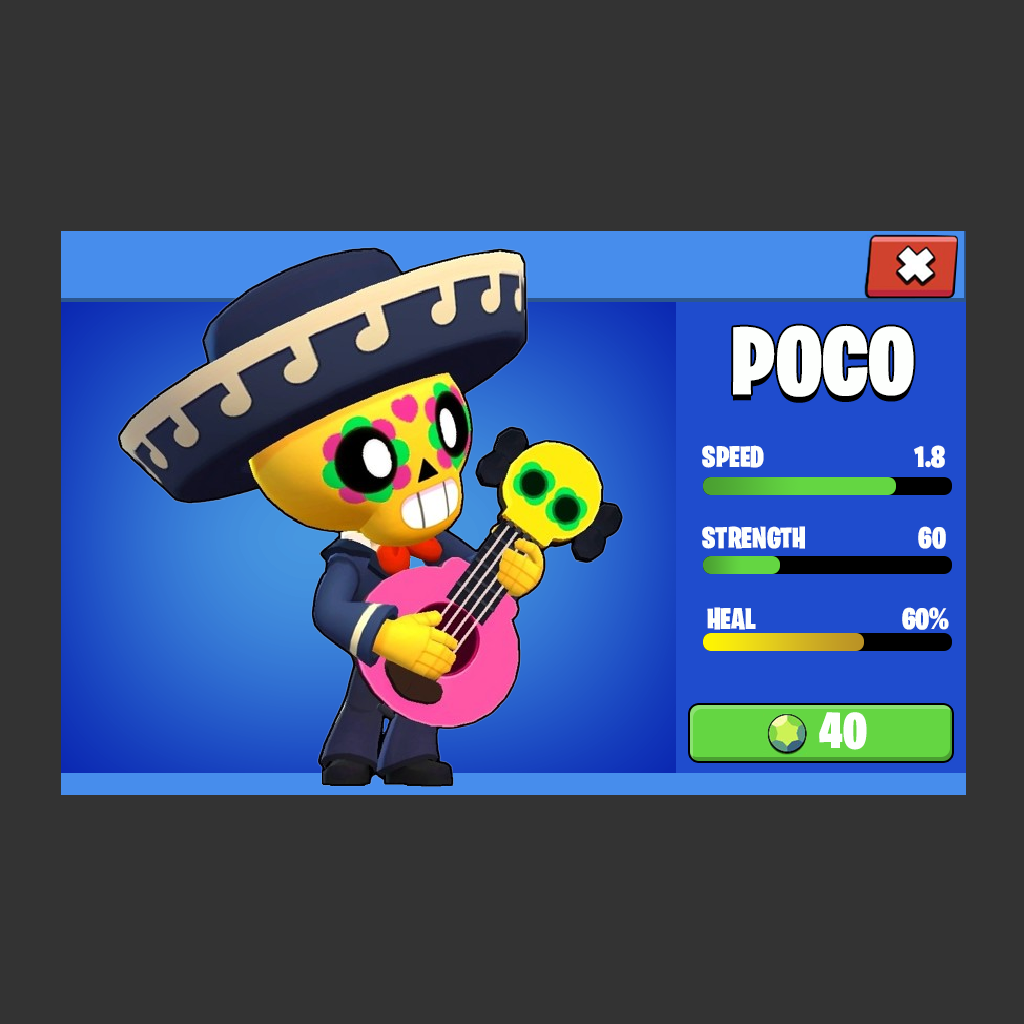
<style>
.page{position:relative;width:1024px;height:1024px;background:#333333}
.page>*{position:absolute;margin:0}
.t1{font:97.7px "BurbankBigCondensed-Black";color:#fdfffd}
.t2{font:30px "BurbankBigCondensed-Black";color:#fdfffd}
.t3{font:51px "BurbankBigCondensed-Black";color:#fdfffd}
</style>
<div class="page">
<p class="t1" style="left:733px;top:325px;width:181px;height:72px">POCO</p>
<p class="t2" style="left:702px;top:445px;width:62px;height:23px">SPEED</p>
<p class="t2" style="left:914px;top:445px;width:31px;height:23px">1.8<br>8</p>
<p class="t2" style="left:702px;top:526px;width:103px;height:23px">STRENGTH</p>
<p class="t2" style="left:918px;top:526px;width:28px;height:23px">60</p>
<p class="t2" style="left:707px;top:607px;width:49px;height:23px">HEAL</p>
<p class="t2" style="left:902px;top:607px;width:47px;height:23px">60%</p>
<p class="t3" style="left:819px;top:712px;width:48px;height:38px">40</p>
</div>
